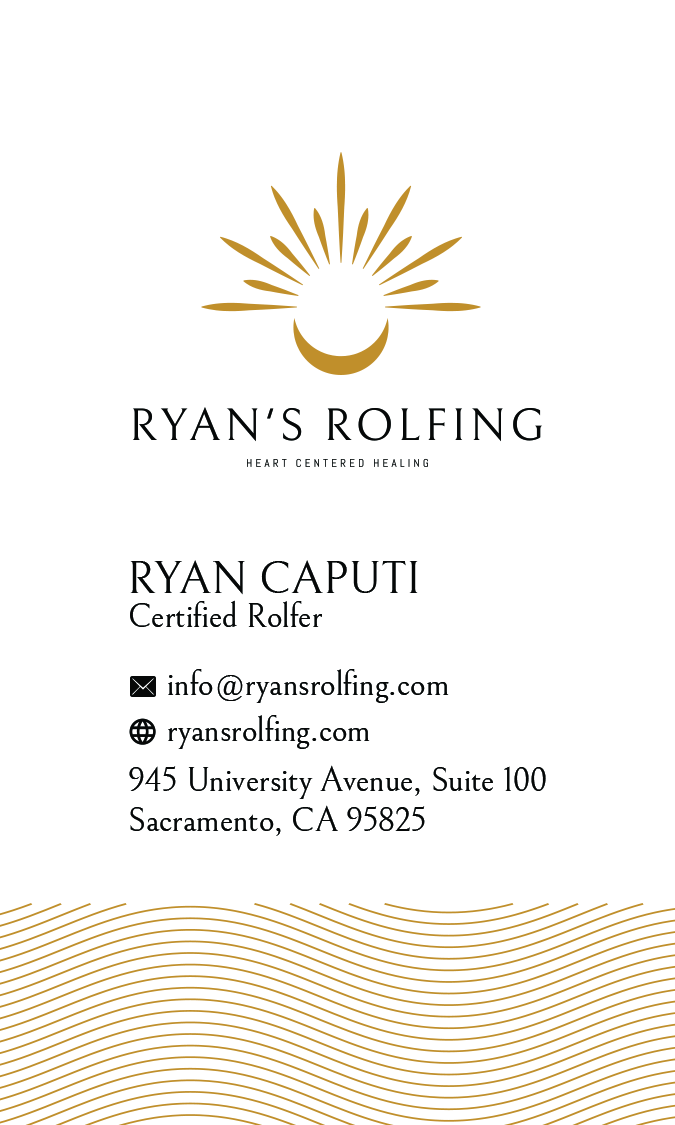
<style>
.page{position:relative;width:675px;height:1125px;background:#ffffff}
.page>*{position:absolute;margin:0}
.t1{font:45.8px "Bellefair-Regular";color:#060808;text-transform:uppercase}
.t2{font:33.3px "Bellefair-Regular";color:#060808}
.t3{font:33.3px/45.8px "Bellefair-Regular";color:#060808}
</style>
<div class="page">
<p class="t1" style="left:130px;top:560px;width:288px;height:35px">Ryan Caputi</p>
<p class="t2" style="left:130px;top:600px;width:192px;height:27px">Certified Rolfer</p>
<p class="t3" style="left:168px;top:669px;width:281px;height:80px">info@ryansrolfing.com<br>ryansrolfing.com</p>
<p class="t2" style="left:129px;top:765px;width:417px;height:71px">945 University Avenue, Suite 100<br>Sacramento, CA 95825</p>
</div>
